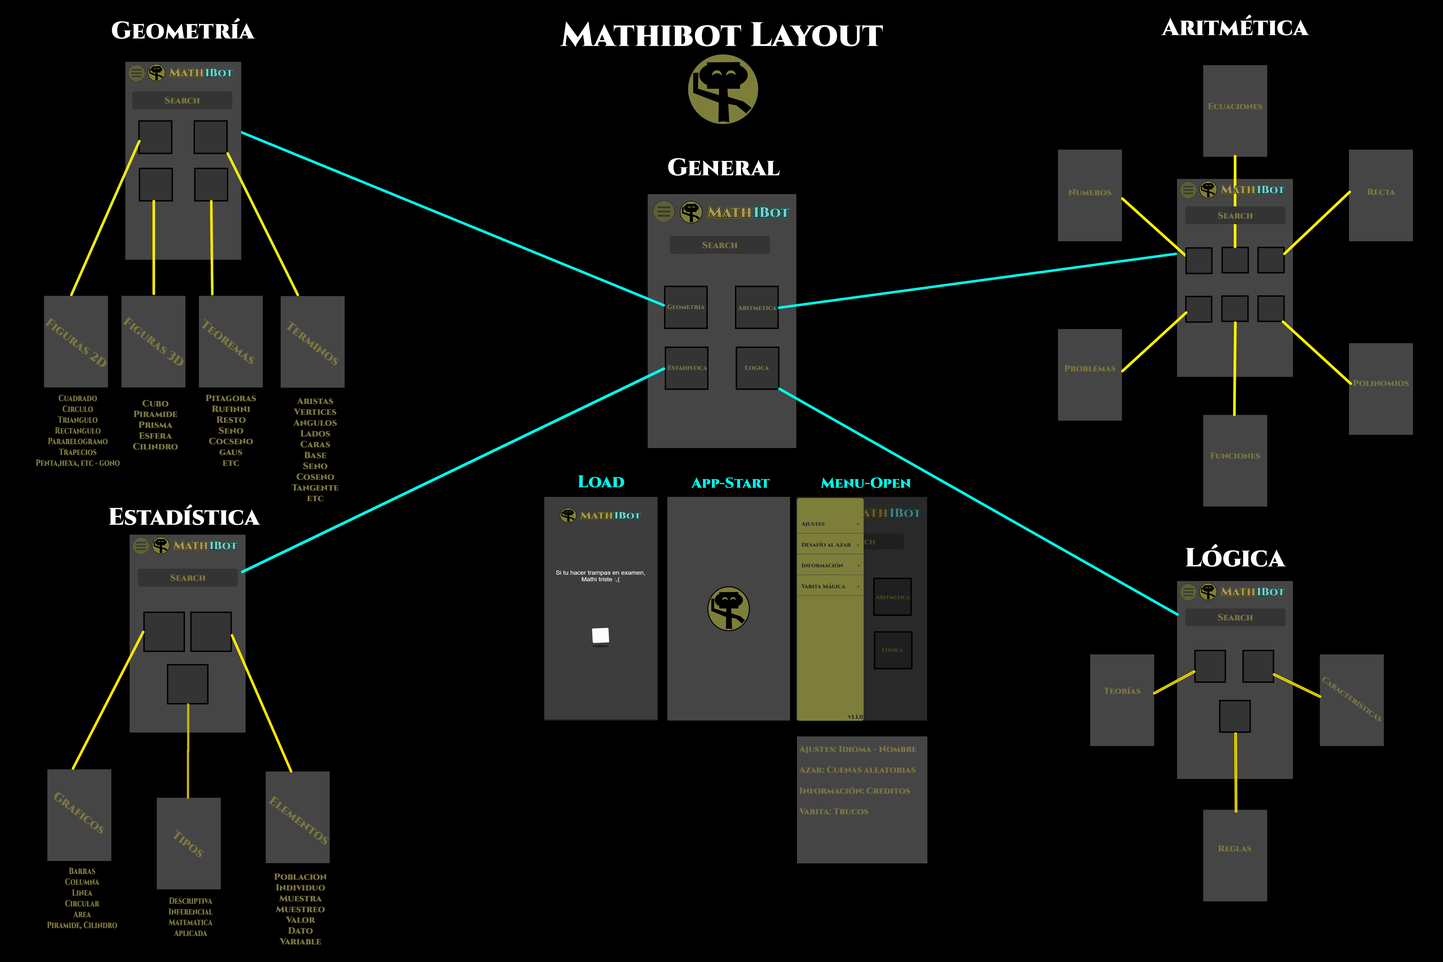
<style>
.page{position:relative;width:1443px;height:962px;background:#000000}
.page>*{position:absolute;margin:0}
.t1{font:24.1px "Cinzel-Black";color:#ffffff}
.t2{font:33.9px "Cinzel-Black";color:#ffffff}
.t3{font:9px "Cinzel-Black";color:#7b7640}
.t4{font:8.7px "Cinzel-Black";color:#7b7640}
.t5{font:6.3px "Cinzel-Black";color:#7b7640}
.t6{font:12.1px "Cinzel-Black";color:#7b7640}
.t7{font:9px "Cinzel-Black";color:#7b7640;scale:0.75 1}
.t8{font:16.9px "Cinzel-Black";color:#00fae9}
.t9{font:14.5px "Cinzel-Black";color:#00fae9}
.t10{font:5.8px "Cinzel-Black";color:#2a2a29}
.t11{font:11.5px "Cinzel-Black";color:#7b7640}
.t12{font:26.2px "Cinzel-Black";color:#ffffff}
.t13{font:5.6px "Cinzel-Black";color:#4a4726}
.t14{font:7.9px "Cinzel-Black";color:#7b7640}
.t15{font:5.9px "Cinzel-Black";color:#2a2a29}
</style>
<div class="page">
<p class="t1" style="left:112px;top:18px;width:143px;height:21px">Geometría</p>
<p class="t1" style="left:1161px;top:14px;width:149px;height:22px">Aritmética</p>
<p class="t2" style="left:560px;top:22px;width:323px;height:25px">Mathibot Layout</p>
<p class="t3" style="left:165px;top:97px;width:35px;height:7px">Search</p>
<p class="t4" style="left:1208px;top:103px;width:55px;height:6px">Ecuaciones</p>
<p class="t1" style="left:668px;top:158px;width:112px;height:18px">General</p>
<p class="t4" style="left:1068px;top:189px;width:44px;height:7px">Numeros</p>
<p class="t4" style="left:1367px;top:189px;width:29px;height:6px">Recta</p>
<p class="t3" style="left:1218px;top:212px;width:35px;height:7px">Search</p>
<p class="t3" style="left:702px;top:242px;width:36px;height:6px">Search</p>
<p class="t5" style="left:667px;top:305px;width:38px;height:4px">Geometria</p>
<p class="t5" style="left:738px;top:305px;width:39px;height:5px">Aritmetica</p>
<p class="t6" style="left:45px;top:318px;width:61px;height:49px;rotate:37deg">Figuras 2D</p>
<p class="t6" style="left:123px;top:317px;width:61px;height:49px;rotate:37deg">Figuras 3D</p>
<p class="t6" style="left:201px;top:319px;width:54px;height:45px;rotate:37deg">Teoremas</p>
<p class="t6" style="left:286px;top:320px;width:53px;height:45px;rotate:37deg">Terminos</p>
<p class="t5" style="left:668px;top:365px;width:40px;height:5px">Estadistica</p>
<p class="t5" style="left:745px;top:365px;width:24px;height:5px">Logica</p>
<p class="t4" style="left:1065px;top:365px;width:51px;height:7px">Problemas</p>
<p class="t4" style="left:1353px;top:380px;width:56px;height:6px">Polinomios</p>
<p class="t7" style="left:36px;top:395px;width:84px;height:72px;text-align:center">Cuadrado<br>Circulo<br>Triangulo<br>Rectangulo<br>Pararelogramo<br>Trapecios<br>Penta,hexa, etc - gono</p>
<p class="t3" style="left:133px;top:400px;width:45px;height:50px;text-align:center">Cubo<br>Piramide<br>Prisma<br>Esfera<br>Cilindro</p>
<p class="t3" style="left:206px;top:395px;width:50px;height:71px;text-align:center">Pitagoras<br>Rufinni<br>Resto<br>Seno<br>Cocseno<br>gaus<br>etc</p>
<p class="t3" style="left:292px;top:397px;width:47px;height:105px;text-align:center">Aristas<br>Vertices<br>Angulos<br>Lados<br>Caras<br>Base<br>Seno<br>Coseno<br>Tangente<br>etc</p>
<p class="t4" style="left:1211px;top:452px;width:49px;height:7px">Funciones</p>
<p class="t8" style="left:578px;top:475px;width:46px;height:13px">Load</p>
<p class="t9" style="left:691px;top:477px;width:79px;height:11px">App-Start</p>
<p class="t9" style="left:820px;top:477px;width:91px;height:11px">Menu-Open</p>
<p class="t1" style="left:109px;top:504px;width:152px;height:21px">Estadística</p>
<p class="t10" style="left:797px;top:521px;width:67px;height:75px;text-align:center"><span class="t11"><br></span>   <br><br>   Ajustes                      &gt;<br>_______________________<br>   <br>   Desafío al Azar    &gt;   _______________________<br><br>   Información          &gt;   _______________________<br>   <br>   Varita Mágica        &gt;   _______________________</p>
<p class="t12" style="left:1186px;top:544px;width:100px;height:23px">Lógica</p>
<p class="t3" style="left:170px;top:574px;width:36px;height:7px">Search</p>
<p class="t13" style="left:876px;top:595px;width:34px;height:4px">Aritmetica</p>
<p class="t3" style="left:1218px;top:614px;width:35px;height:7px">Search</p>
<p class="t13" style="left:882px;top:648px;width:21px;height:4px">Logica</p>
<p class="t14" style="left:1323px;top:677px;width:59px;height:45px;rotate:36deg">Caracteristicas</p>
<p class="t4" style="left:1104px;top:686px;width:37px;height:8px">Teorías</p>
<p class="t15" style="left:848px;top:715px;width:15px;height:4px">v1.1.0</p>
<p class="t4" style="left:799px;top:746px;width:118px;height:69px">Ajustes: Idioma - Nombre<br> <br> Azar: Cuenas aleatorias<br><br> Información: Creditos<br><br> Varita: Trucos</p>
<p class="t6" style="left:54px;top:793px;width:51px;height:41px;rotate:37deg">Graficos</p>
<p class="t6" style="left:268px;top:795px;width:61px;height:50px;rotate:37deg">Elementos</p>
<p class="t6" style="left:173px;top:829px;width:31px;height:28px;rotate:37deg">Tipos</p>
<p class="t4" style="left:1218px;top:845px;width:34px;height:7px">Reglas</p>
<p class="t7" style="left:47px;top:868px;width:70px;height:61px;text-align:center">Barras<br>Columna<br>Linea<br>Circular<br>Area<br>Piramide, Cilindro</p>
<p class="t3" style="left:274px;top:873px;width:53px;height:72px;text-align:center">Poblacion<br>Individuo<br>Muestra<br>Muestreo<br>Valor<br>Dato<br>Variable</p>
<p class="t7" style="left:168px;top:897px;width:45px;height:39px;text-align:center">Descriptiva<br>Inferencial<br>Matematica<br>Aplicada</p>
</div>
